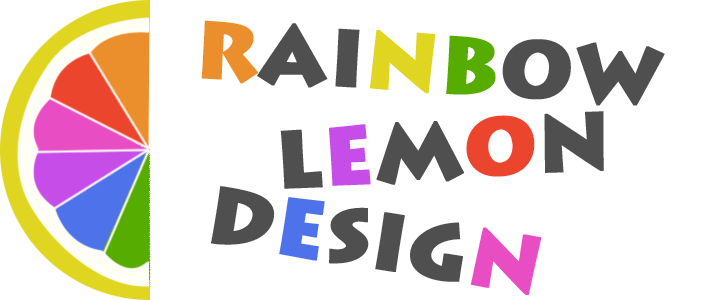
<style>
.page{position:relative;width:709px;height:300px;background:#ffffff}
.page>*{position:absolute;margin:0}
.t1{font:80px "LithosPro-Black";color:#504f4f;text-transform:uppercase;font-weight:bold}
.t2{font:80px "LithosPro-Black";color:#eb8f2d;text-transform:uppercase;font-weight:bold}
.t3{font:80px "LithosPro-Black";color:#e0d521;text-transform:uppercase;font-weight:bold}
.t4{font:80px "LithosPro-Black";color:#57ac00;text-transform:uppercase;font-weight:bold}
.t5{font:80px "LithosPro-Black";color:#4f4f4f;text-transform:uppercase;font-weight:bold}
.t6{font:80px "LithosPro-Black";color:#c74de9;text-transform:uppercase;font-weight:bold}
.t7{font:80px "LithosPro-Black";color:#eb462d;text-transform:uppercase;font-weight:bold}
.t8{font:80px "LithosPro-Black";color:#4d72e9;text-transform:uppercase;font-weight:bold}
.t9{font:80px "LithosPro-Black";color:#e94dc4;text-transform:uppercase;font-weight:bold}
</style>
<div class="page">
<p class="t1" style="left:201px;top:20px;width:464px;height:86px;rotate:3deg"><span class="t2">R</span>ai<span class="t3">n</span><span class="t4">b</span>ow</p>
<p class="t5" style="left:280px;top:111px;width:324px;height:78px;rotate:-3deg">l<span class="t6">e</span>m<span class="t7">o</span>n</p>
<p class="t5" style="left:211px;top:186px;width:331px;height:109px;rotate:9deg">d<span class="t8">e</span>sig<span class="t9">n</span></p>
</div>
